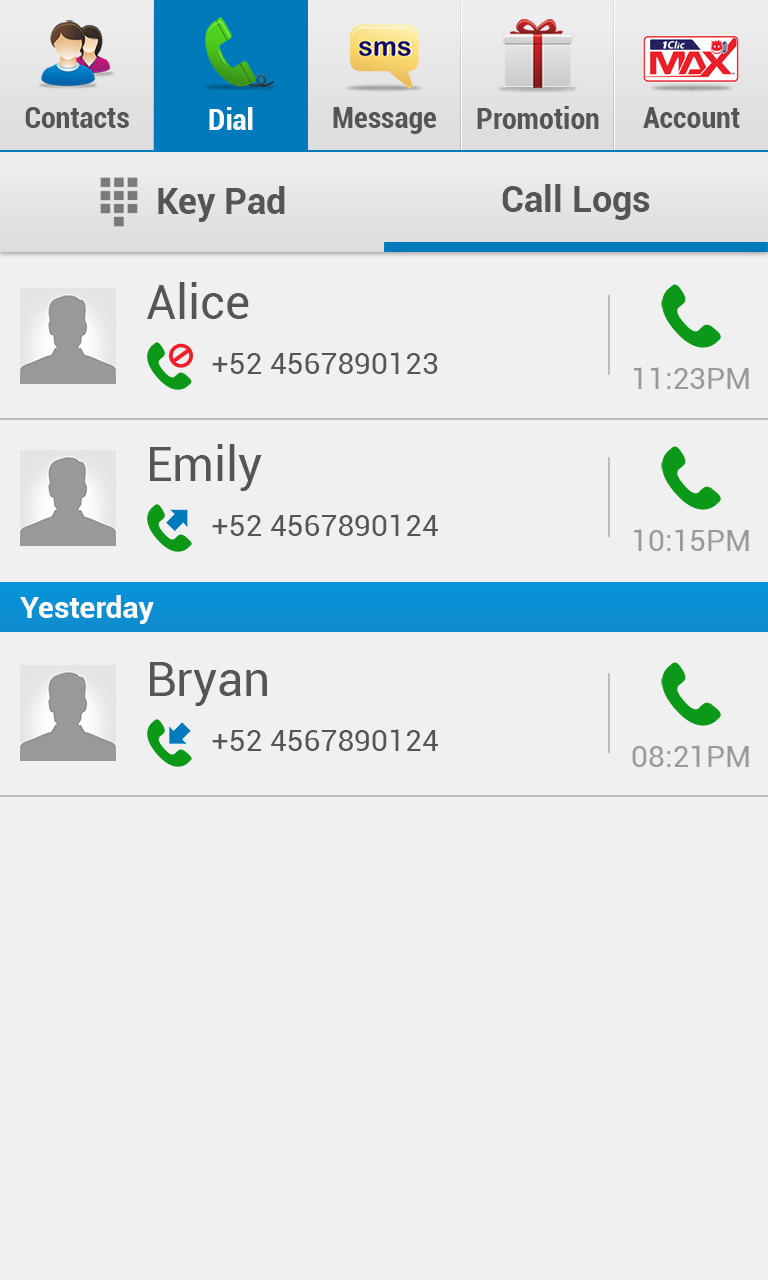
<style>
.page{position:relative;width:768px;height:1280px;background:#f0f0f0}
.page>*{position:absolute;margin:0}
.t1{font:30px "Roboto-BoldCondensed";color:#555555}
.t2{font:30px "Roboto-BoldCondensed";color:#ffffff}
.t3{font:36px "Roboto-Bold";color:#555555}
.t4{font:48px "Roboto-Regular";color:#555555}
.t5{font:30px "Roboto-Regular";color:#555555}
.t6{font:30px "Roboto-Regular";color:#999999}
.t7{font:30px "Roboto-Bold";color:#ffffff}
</style>
<div class="page">
<p class="t1" style="left:25px;top:107px;width:104px;height:21px">Contacts</p>
<p class="t2" style="left:209px;top:107px;width:44px;height:23px">Dial</p>
<p class="t1" style="left:333px;top:107px;width:103px;height:27px">Message</p>
<p class="t1" style="left:477px;top:106px;width:122px;height:23px">Promotion</p>
<p class="t1" style="left:643px;top:107px;width:97px;height:21px">Account</p>
<p class="t3" style="left:502px;top:184px;width:148px;height:36px">Call Logs</p>
<p class="t3" style="left:158px;top:186px;width:127px;height:36px">Key Pad</p>
<p class="t4" style="left:147px;top:282px;width:102px;height:37px">Alice</p>
<p class="t5" style="left:212px;top:352px;width:226px;height:22px">+52 4567890123</p>
<p class="t6" style="left:633px;top:367px;width:116px;height:22px">11:23PM</p>
<p class="t4" style="left:150px;top:444px;width:112px;height:47px">Emily</p>
<p class="t5" style="left:212px;top:514px;width:226px;height:22px">+52 4567890124</p>
<p class="t6" style="left:633px;top:529px;width:116px;height:22px">10:15PM</p>
<p class="t7" style="left:20px;top:595px;width:134px;height:29px">Yesterday</p>
<p class="t4" style="left:150px;top:662px;width:117px;height:44px">Bryan</p>
<p class="t5" style="left:212px;top:729px;width:226px;height:22px">+52 4567890124</p>
<p class="t6" style="left:632px;top:745px;width:117px;height:22px">08:21PM</p>
</div>
